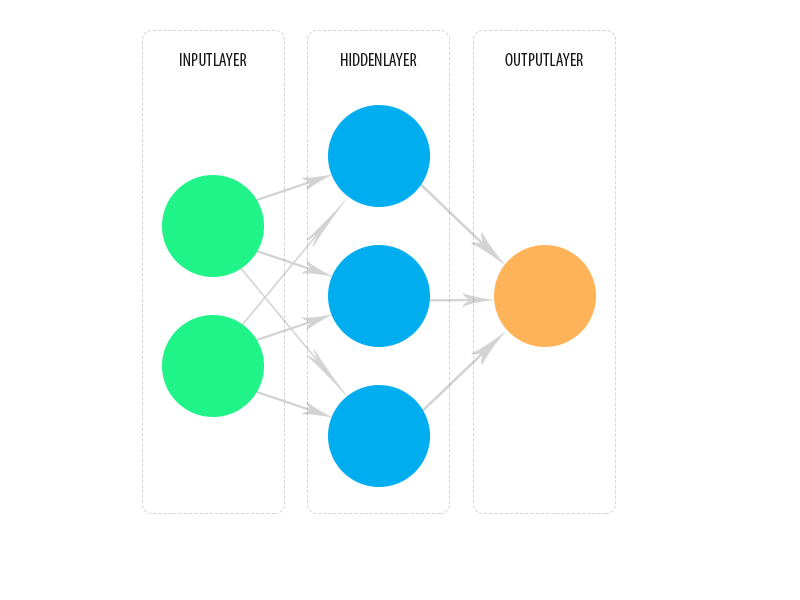
<style>
.page{position:relative;width:800px;height:600px;background:#ffffff}
.page>*{position:absolute;margin:0}
.t1{font:18px "MyriadPro-Cond";color:#191919}
</style>
<div class="page">
<p class="t1" style="left:180px;top:53px;width:67px;height:13px">INPUTLAYER</p>
<p class="t1" style="left:341px;top:53px;width:76px;height:13px">HIDDENLAYER</p>
<p class="t1" style="left:505px;top:53px;width:78px;height:13px">OUTPUTLAYER</p>
</div>
